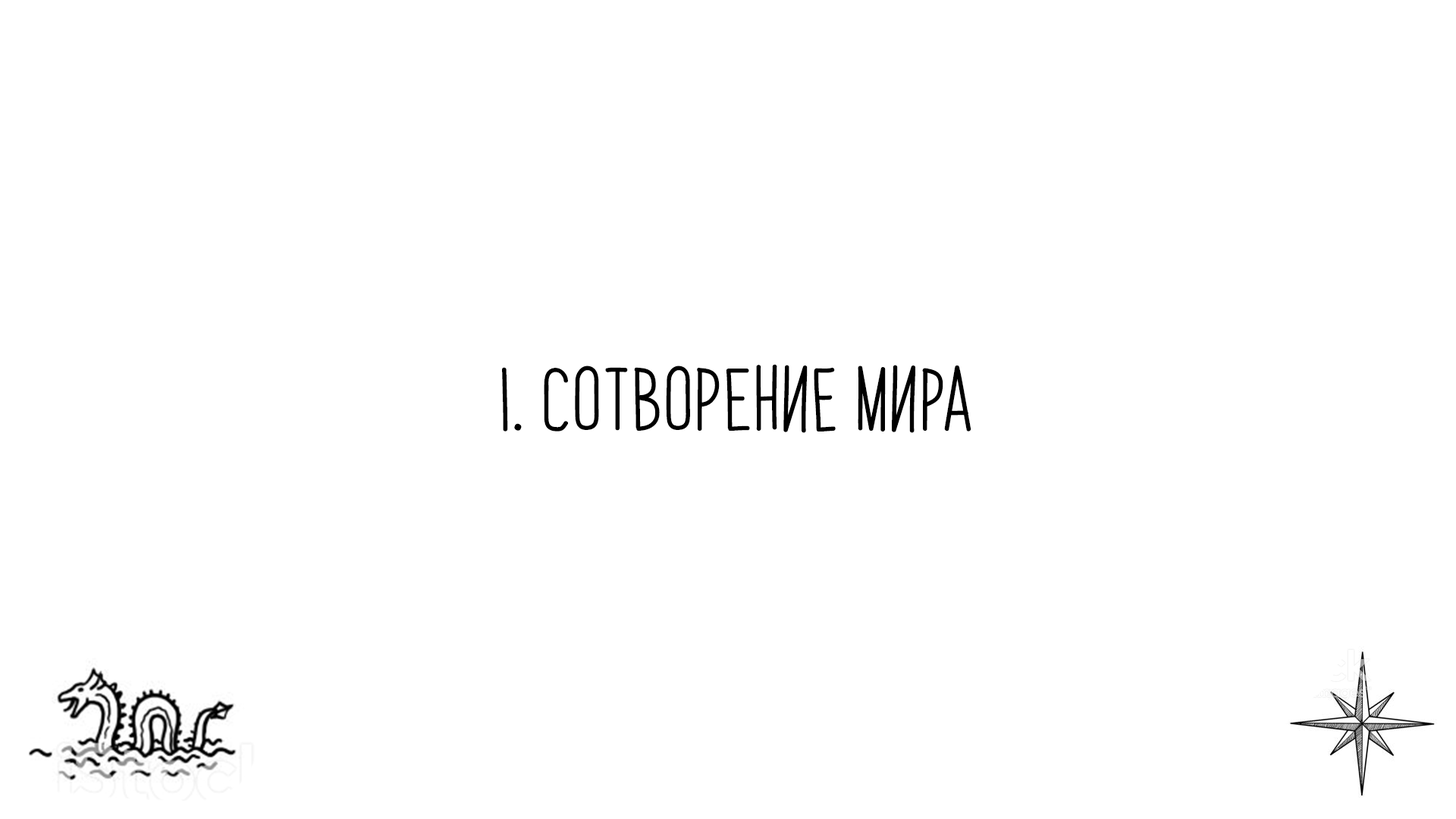
<style>
.page{position:relative;width:1456px;height:819px;background:#ffffff}
.page>*{position:absolute;margin:0}
.t1{font:54.6px "PapayaSunrise";color:#000000}
</style>
<div class="page">
<p class="t1" style="left:502px;top:364px;width:469px;height:69px">I. СОТВОРЕние мира</p>
</div>
